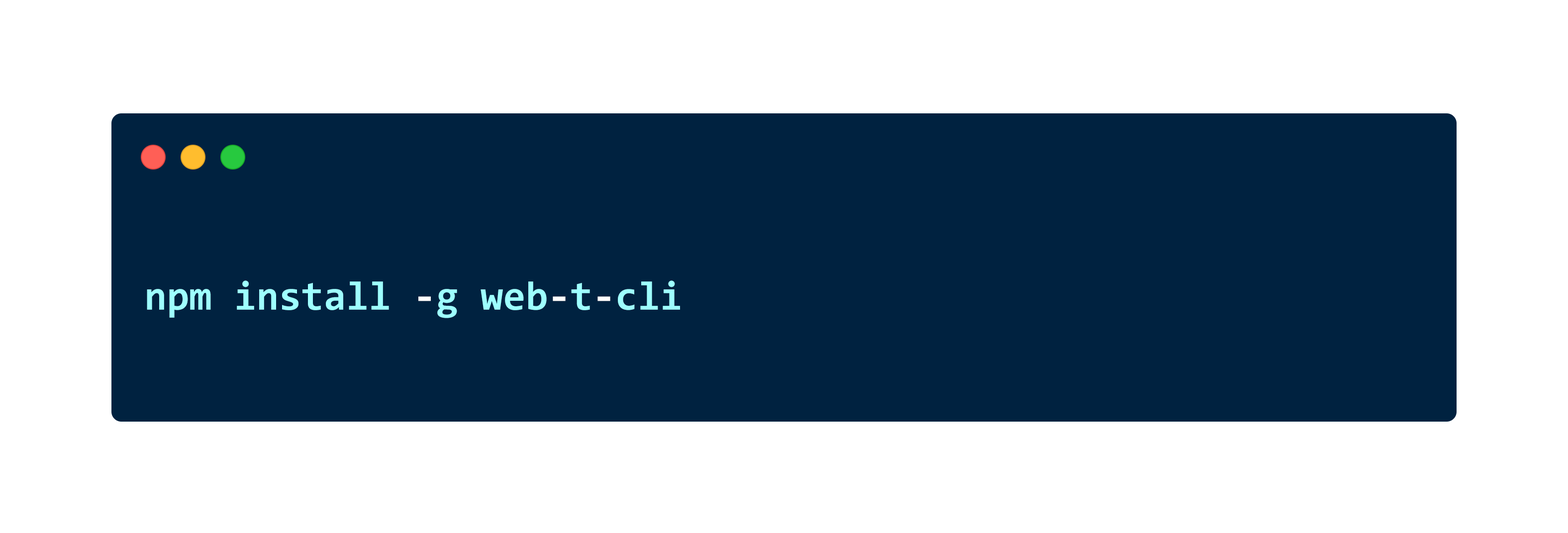
<style>
.page{position:relative;width:1568px;height:533px;background:#ffffff}
.page>*{position:absolute;margin:0}
.t1{font:40.8px "Consolas-Bold";color:#9effff}
.t2{font:40.8px "Consolas-Bold";color:#ffffff}
</style>
<div class="page">
<p class="t1" style="left:147px;top:281px;width:533px;height:37px">npm install <span class="t2">-</span>g web<span class="t2">-</span>t<span class="t2">-</span>cli</p>
</div>
